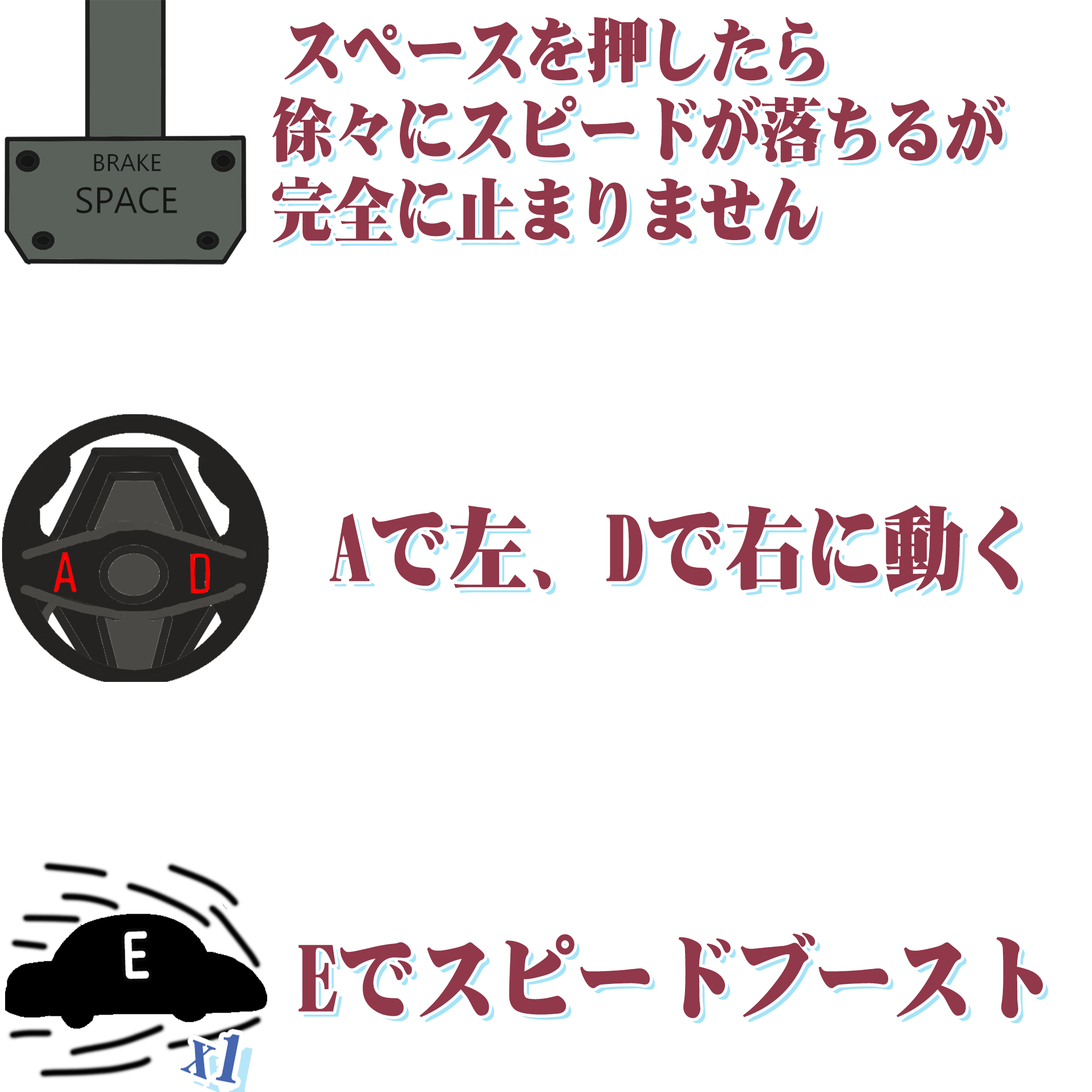
<style>
.page{position:relative;width:1092px;height:1092px;background:#ffffff}
.page>*{position:absolute;margin:0}
.t1{font:70.7px/19.9px "DFMincho-SU-WIN-RKSJ-H";letter-spacing:-0.04em;color:#91384a;scale:0.9 1}
.t2{font:92px "DFMincho-SU-WIN-RKSJ-H";letter-spacing:-0.04em;color:#91384a;scale:0.9 1}
</style>
<div class="page">
<p class="t1" style="left:272px;top:17px;width:733px;height:226px;text-align:right">スペースを押したら         <br><br><br><br>徐々にスピードが落ちるが　 <br><br><br><br>完全に止まりません</p>
<p class="t2" style="left:330px;top:505px;width:688px;height:87px">Aで左、Dで右に動く</p>
<p class="t2" style="left:298px;top:932px;width:745px;height:86px">Eでスピードブースト</p>
</div>
